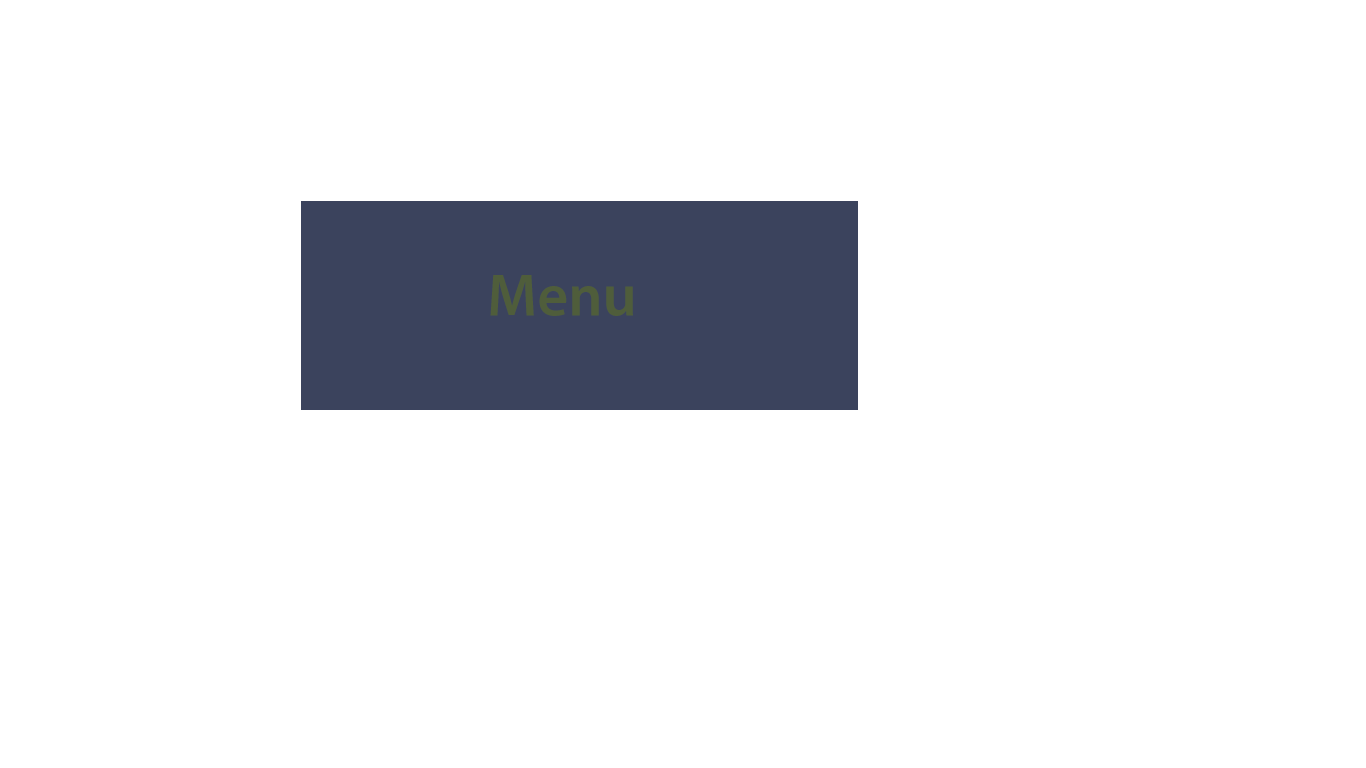
<style>
.page{position:relative;width:1366px;height:768px;background:#ffffff}
.page>*{position:absolute;margin:0}
.t1{font:60px "MyriadPro-Semibold";color:#4f5d3b}
</style>
<div class="page">
<p class="t1" style="left:490px;top:275px;width:143px;height:41px">Menu</p>
</div>
